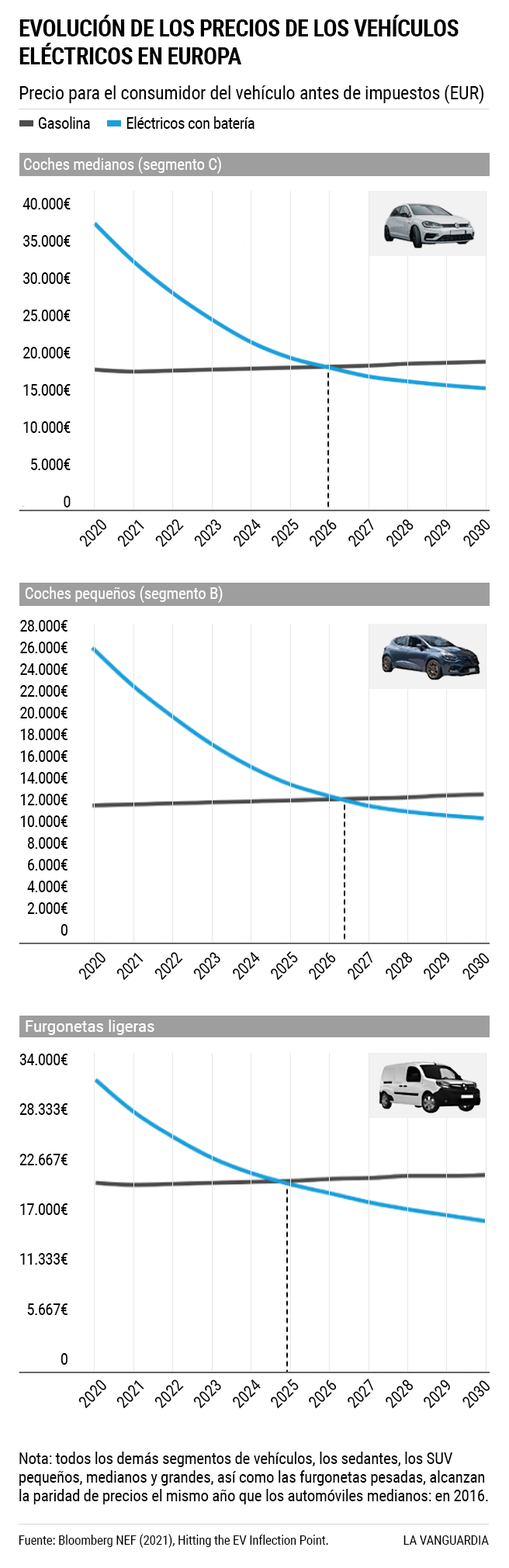
<style>
.page{position:relative;width:509px;height:1568px;background:#ffffff}
.page>*{position:absolute;margin:0}
.t1{font:23.3px/27.9px "RobotoCondensed-Bold";letter-spacing:-0.02em;color:#000000;text-transform:uppercase}
.t2{font:18.6px "RobotoCondensed-Regular";letter-spacing:-0.01em;color:#000000}
.t3{font:16.3px "RobotoCondensed-Regular";letter-spacing:-0.03em;color:#000000}
.t4{font:16.3px "RobotoCondensed-Regular";letter-spacing:-0.014em;color:#ffffff}
.t5{font:16.3px/37.2px "RobotoCondensed-Regular";letter-spacing:-0.04em;color:#000000}
.t6{font:16.3px/21.7px "RobotoCondensed-Regular";letter-spacing:-0.04em;color:#000000}
.t7{font:16.3px "RobotoCondensed-Regular";letter-spacing:-0.035em;color:#000000}
.t8{font:16.3px "RobotoCondensed-Regular";letter-spacing:-0.014em;color:#ffffff;scale:1.13 1}
.t9{font:16.3px/50px "RobotoCondensed-Regular";letter-spacing:-0.035em;color:#000000}
.t10{font:16.3px "RobotoCondensed-Regular";letter-spacing:-0.014em;color:#000000}
.t11{font:16.3px/18.6px "RobotoCondensed-Regular";letter-spacing:-0.014em;color:#000000}
.t12{font:13.2px "RobotoCondensed-Regular";letter-spacing:-0.014em;color:#000000}
</style>
<div class="page">
<p class="t1" style="left:19px;top:15px;width:440px;height:49px">evolución de los precios de Los vehículos eléctricos en Europa</p>
<p class="t2" style="left:19px;top:85px;width:465px;height:19px">Precio para el consumidor del vehículo antes de impuestos (EUR)</p>
<p class="t3" style="left:38px;top:116px;width:216px;height:13px">Gasolina           Eléctricos con batería</p>
<p class="t4" style="left:23px;top:157px;width:198px;height:17px">Coches medianos (segmento C)</p>
<p class="t5" style="left:22px;top:198px;width:49px;height:309px;text-align:right">40.000€<br>35.000€<br>30.000€<br>25.000€<br>20.000€<br>15.000€<br>10.000€<br>5.000€<br>0</p>
<p class="t3" style="left:79px;top:519px;width:28px;height:29px;rotate:-45deg">2020</p>
<p class="t3" style="left:117px;top:519px;width:27px;height:29px;rotate:-45deg">2021</p>
<p class="t3" style="left:155px;top:519px;width:29px;height:29px;rotate:-45deg">2022</p>
<p class="t3" style="left:194px;top:519px;width:27px;height:29px;rotate:-45deg">2023</p>
<p class="t3" style="left:234px;top:518px;width:27px;height:30px;rotate:-45deg">2024</p>
<p class="t3" style="left:272px;top:518px;width:27px;height:30px;rotate:-45deg">2025</p>
<p class="t3" style="left:310px;top:519px;width:27px;height:29px;rotate:-45deg">2026</p>
<p class="t3" style="left:348px;top:517px;width:26px;height:31px;rotate:-45deg">2027</p>
<p class="t3" style="left:386px;top:519px;width:28px;height:29px;rotate:-45deg">2028</p>
<p class="t3" style="left:424px;top:519px;width:27px;height:29px;rotate:-45deg">2029</p>
<p class="t3" style="left:463px;top:519px;width:27px;height:29px;rotate:-45deg">2030</p>
<p class="t4" style="left:25px;top:586px;width:198px;height:17px">Coches pequeños (segmento B)</p>
<p class="t6" style="left:20px;top:620px;width:47px;height:316px;text-align:right">28.000€<br>26.000€<br>24.000€<br>22.000€<br>20.000€<br>18.000€<br>16.000€<br>14.000€<br>12.000€<br>10.000€<br>8.000€<br>6.000€<br>4.000€<br>2.000€<br>0</p>
<p class="t7" style="left:78px;top:952px;width:28px;height:29px;rotate:-45deg">2020</p>
<p class="t7" style="left:116px;top:952px;width:28px;height:29px;rotate:-45deg">2021</p>
<p class="t7" style="left:154px;top:952px;width:29px;height:29px;rotate:-45deg">2022</p>
<p class="t7" style="left:193px;top:952px;width:27px;height:29px;rotate:-45deg">2023</p>
<p class="t7" style="left:233px;top:951px;width:27px;height:30px;rotate:-45deg">2024</p>
<p class="t7" style="left:271px;top:951px;width:27px;height:30px;rotate:-45deg">2025</p>
<p class="t7" style="left:309px;top:952px;width:27px;height:29px;rotate:-45deg">2026</p>
<p class="t7" style="left:348px;top:950px;width:24px;height:31px;rotate:-45deg">2027</p>
<p class="t7" style="left:386px;top:952px;width:27px;height:29px;rotate:-45deg">2028</p>
<p class="t7" style="left:424px;top:952px;width:25px;height:29px;rotate:-45deg">2029</p>
<p class="t7" style="left:462px;top:953px;width:28px;height:28px;rotate:-45deg">2030</p>
<p class="t8" style="left:26px;top:1019px;width:128px;height:16px">Furgonetas ligeras</p>
<p class="t9" style="left:19px;top:1054px;width:48px;height:311px;text-align:right">34.000€<br>28.333€<br>22.667€<br>17.000€<br>11.333€<br>5.667€<br>0</p>
<p class="t10" style="left:78px;top:1379px;width:28px;height:30px;rotate:-45deg">2020</p>
<p class="t10" style="left:116px;top:1379px;width:28px;height:30px;rotate:-45deg">2021</p>
<p class="t10" style="left:154px;top:1379px;width:30px;height:30px;rotate:-45deg">2022</p>
<p class="t10" style="left:193px;top:1379px;width:28px;height:30px;rotate:-45deg">2023</p>
<p class="t10" style="left:233px;top:1379px;width:28px;height:30px;rotate:-45deg">2024</p>
<p class="t10" style="left:271px;top:1379px;width:28px;height:30px;rotate:-45deg">2025</p>
<p class="t10" style="left:309px;top:1379px;width:28px;height:30px;rotate:-45deg">2026</p>
<p class="t10" style="left:348px;top:1378px;width:25px;height:31px;rotate:-45deg">2027</p>
<p class="t10" style="left:386px;top:1379px;width:28px;height:30px;rotate:-45deg">2028</p>
<p class="t10" style="left:424px;top:1379px;width:26px;height:30px;rotate:-45deg">2029</p>
<p class="t10" style="left:462px;top:1380px;width:28px;height:29px;rotate:-45deg">2030</p>
<p class="t11" style="left:19px;top:1452px;width:469px;height:52px">Nota: todos los demás segmentos de vehículos, los sedantes, los SUV pequeños, medianos y grandes, así como las furgonetas pesadas, alcanzan la paridad de precios el mismo año que los automóviles medianos: en 2016.</p>
<p class="t12" style="left:19px;top:1534px;width:309px;height:14px">Fuente: Bloomberg NEF (2021), Hitting the EV Inflection Point.</p>
<p class="t12" style="left:403px;top:1535px;width:86px;height:10px">LA VANGUARDIA</p>
</div>
